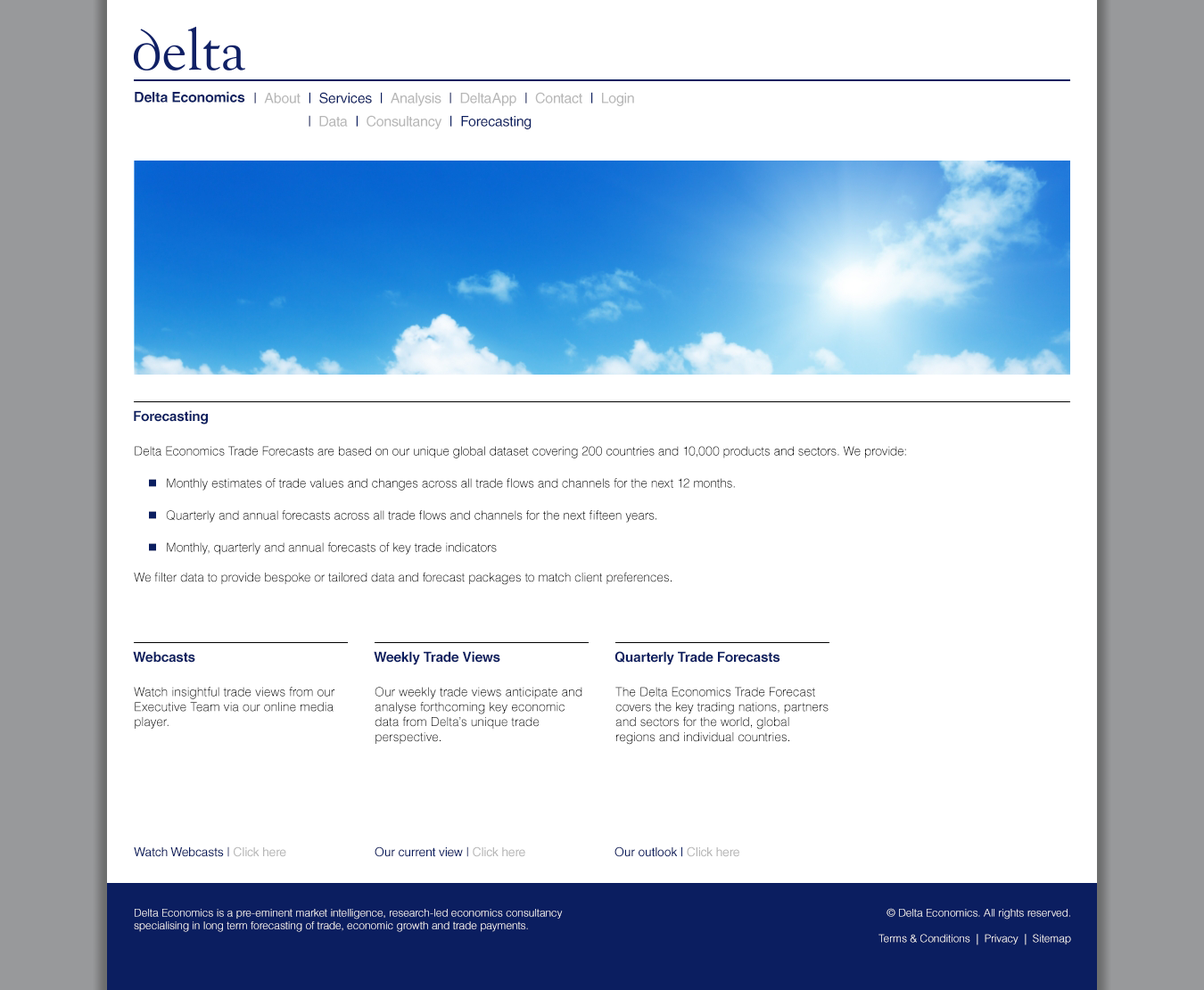
<style>
.page{position:relative;width:1204px;height:990px;background:#ffffff}
.page>*{position:absolute;margin:0}
.t1{font:14.3px "HelveticaLTStd-Bold";letter-spacing:-0.015em;color:#0b1e60}
.t2{font:14.3px "HelveticaLTStd-Roman";letter-spacing:-0.015em;color:#0b1e60}
.t3{font:14.3px "HelveticaLTStd-Roman";letter-spacing:-0.015em;color:#b7b7b7}
.t4{font:13.8px "HelveticaLTStd-Bold";letter-spacing:-0.015em;color:#0b1e60}
.t5{font:12.5px "HelveticaLTStd-Light";color:#000000}
.t6{font:12.5px "HelveticaLTStd-Light";letter-spacing:-0.005em;color:#000000}
.t7{font:12.5px "HelveticaLTStd-Roman";letter-spacing:-0.015em;color:#0b1e60}
.t8{font:12.5px "HelveticaLTStd-Roman";letter-spacing:-0.015em;color:#b7b7b7}
.t9{font:10.7px "HelveticaLTStd-Light";color:#ffffff}
</style>
<div class="page">
<p class="t1" style="left:135px;top:91px;width:110px;height:12px">Delta Economics</p>
<p class="t2" style="left:254px;top:92px;width:380px;height:14px">|  <span class="t3">About  </span>|  Services  |  <span class="t3">Analysis  </span>|  <span class="t3">DeltaApp  </span>|  <span class="t3">Contact  </span>|  <span class="t3">Login</span></p>
<p class="t2" style="left:309px;top:115px;width:223px;height:14px">|  <span class="t3">Data  </span>|<span class="t3">  Consultancy  </span>|  Forecasting</p>
<p class="t4" style="left:134px;top:410px;width:74px;height:15px">Forecasting</p>
<p class="t4" style="left:133px;top:651px;width:62px;height:12px">Webcasts</p>
<p class="t4" style="left:374px;top:651px;width:126px;height:14px">Weekly Trade Views</p>
<p class="t4" style="left:615px;top:651px;width:166px;height:14px">Quarterly Trade Forecasts</p>
<p class="t5" style="left:134px;top:687px;width:201px;height:42px">Watch insightful trade views from our Executive Team via our online media player.</p>
<p class="t5" style="left:375px;top:687px;width:208px;height:57px">Our weekly trade views anticipate and analyse forthcoming key economic data from Delta’s unique trade perspective.</p>
<p class="t6" style="left:616px;top:687px;width:213px;height:58px">The Delta Economics Trade Forecast covers the key trading nations, partners and sectors for the world, global regions and individual countries.</p>
<p class="t7" style="left:134px;top:847px;width:152px;height:10px">Watch Webcasts | <span class="t8">Click here</span></p>
<p class="t7" style="left:375px;top:847px;width:150px;height:10px">Our current view | <span class="t8">Click here</span></p>
<p class="t7" style="left:615px;top:847px;width:125px;height:10px">Our outlook | <span class="t8">Click here</span></p>
<p class="t9" style="left:134px;top:909px;width:429px;height:23px">Delta Economics is a pre-eminent market intelligence, research-led economics consultancy<br>specialising in long term forecasting of trade, economic growth and trade payments.</p>
<p class="t9" style="left:879px;top:908px;width:192px;height:38px;text-align:right">© Delta Economics. All rights reserved.<br><br>Terms &amp; Conditions  |  Privacy  |  Sitemap</p>
</div>
